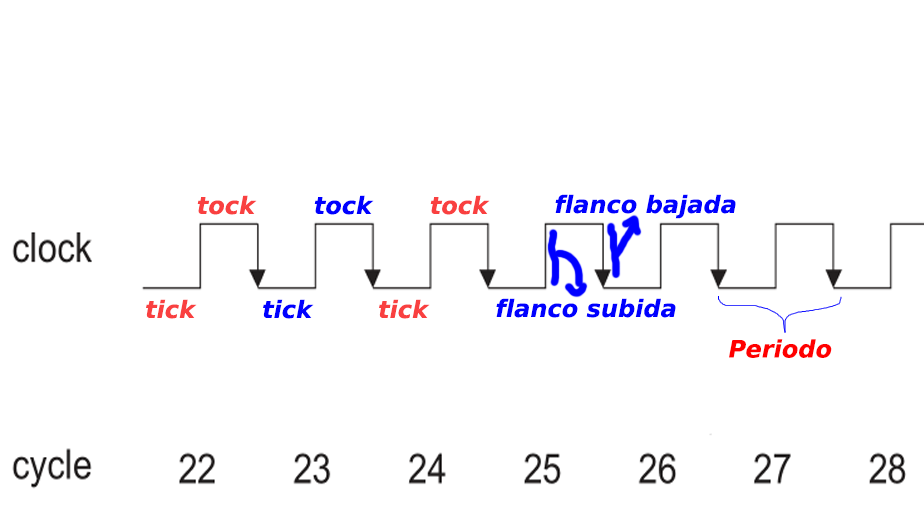
<style>
.page{position:relative;width:924px;height:512px;background:#ffffff}
.page>*{position:absolute;margin:0}
.t1{font:24px "DejaVuSans-BoldOblique";color:#f94040}
.t2{font:24px "DejaVuSans-BoldOblique";color:#0000ff}
.t3{font:24px "DejaVuSans-BoldOblique";color:#ff0000}
</style>
<div class="page">
<p class="t1" style="left:197px;top:195px;width:60px;height:20px">tock</p>
<p class="t2" style="left:314px;top:195px;width:60px;height:20px">tock</p>
<p class="t1" style="left:430px;top:195px;width:60px;height:20px">tock</p>
<p class="t2" style="left:555px;top:194px;width:181px;height:25px">flanco bajada</p>
<p class="t1" style="left:146px;top:299px;width:51px;height:20px">tick</p>
<p class="t2" style="left:263px;top:299px;width:51px;height:20px">tick</p>
<p class="t1" style="left:379px;top:299px;width:51px;height:20px">tick</p>
<p class="t2" style="left:496px;top:298px;width:180px;height:20px">flanco subida</p>
<p class="t3" style="left:729px;top:339px;width:103px;height:19px">Periodo</p>
</div>
